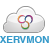
<style>
.page{position:relative;width:50px;height:50px;background:#ffffff}
.page>*{position:absolute;margin:0}
.t1{font:10px "HelveticaCE-Bold";color:#3599c9}
</style>
<div class="page">
<p class="t1" style="left:0px;top:36px;width:49px;height:7px">XERVMON</p>
</div>
